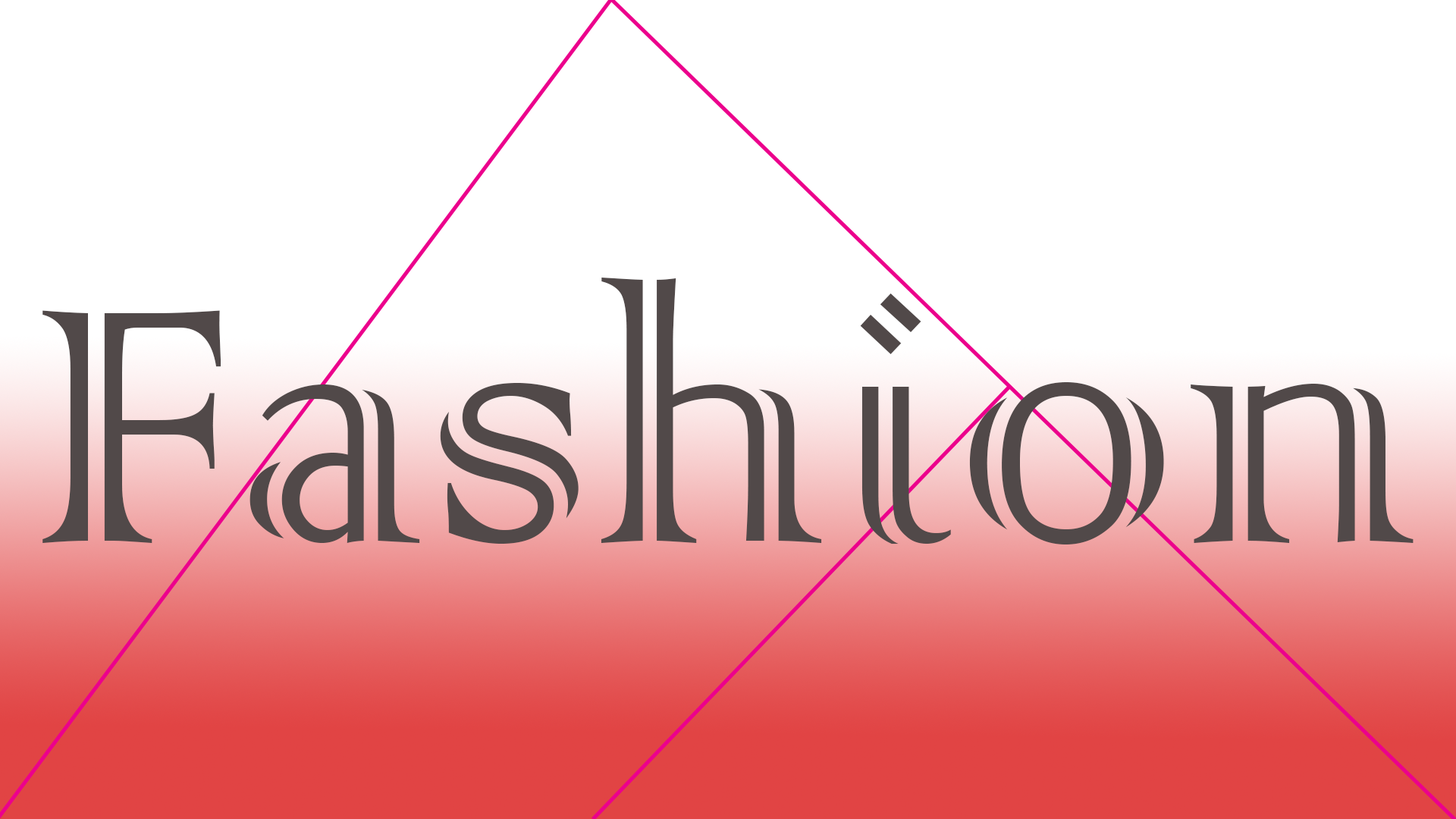
<style>
.page{position:relative;width:1456px;height:819px;background:#ffffff}
.page>*{position:absolute;margin:0}
.t1{font:442.4px "ColonnaMT";letter-spacing:0.005em;color:#514949}
</style>
<div class="page">
<p class="t1" style="left:42px;top:278px;width:1372px;height:266px">Fashion</p>
</div>
